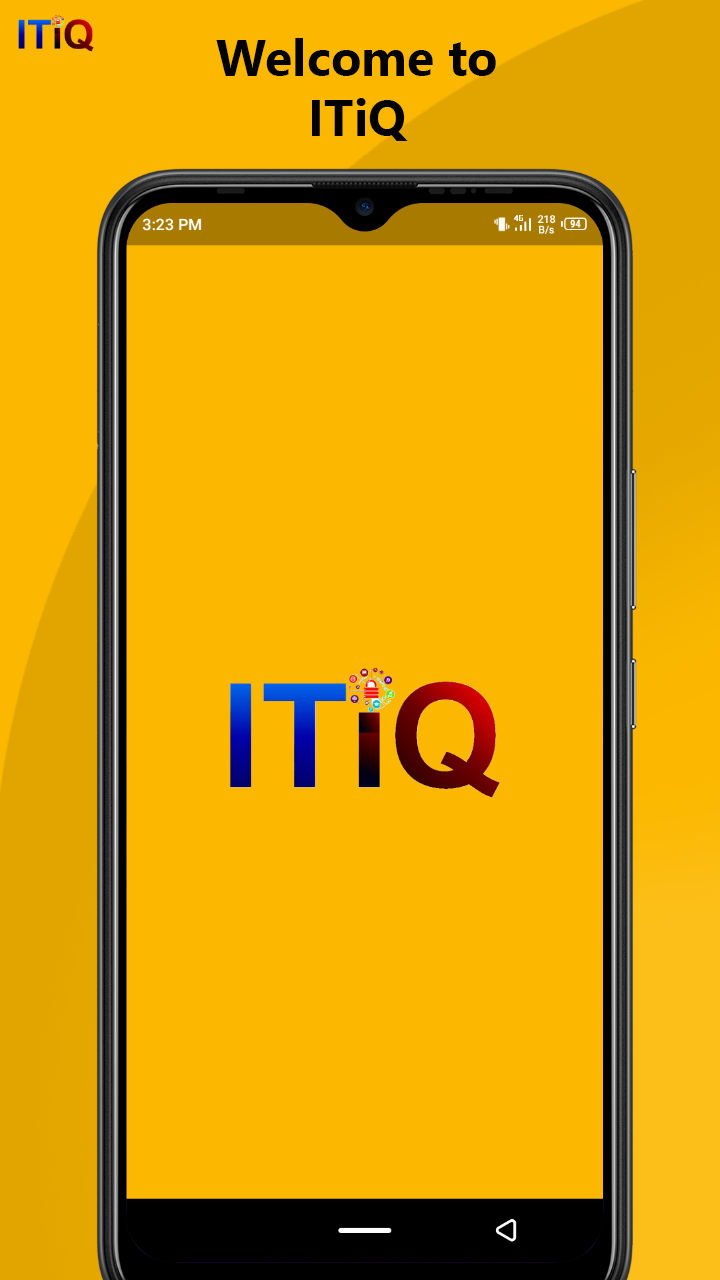
<style>
.page{position:relative;width:720px;height:1280px;background:#fcb800}
.page>*{position:absolute;margin:0}
.t1{font:50px "SegoeUI-Bold";color:#000000}
</style>
<div class="page">
<p class="t1" style="left:216px;top:38px;width:280px;height:103px;text-align:center">Welcome to<br>ITiQ</p>
</div>
